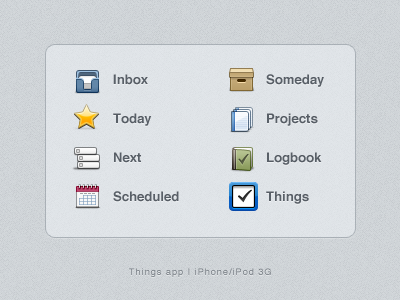
<style>
.page{position:relative;width:400px;height:300px}
.page>*{position:absolute;margin:0}
.t1{font:13.1px/39px "Helvetica-Bold";color:#5f5f5f}
.t2{font:9.1px "Helvetica";letter-spacing:0.11em}
</style>
<div class="page">
<p class="t1" style="left:113px;top:74px;width:66px;height:128px">Inbox<br>Today<br>Next<br>Scheduled</p>
<p class="t1" style="left:266px;top:74px;width:58px;height:130px">Someday<br>Projects<br>Logbook<br>Things</p>
<p class="t2" style="left:129px;top:268px;width:142px;height:9px">Things app | iPhone/iPod 3G</p>
</div>
